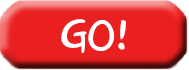
<style>
.page{position:relative;width:189px;height:70px;background:#ea2020}
.page>*{position:absolute;margin:0}
.t1{font:47.5px "DXHgrmB-KSCpc-EUC-H";letter-spacing:-0.025em;color:#ffffff}
</style>
<div class="page">
<p class="t1" style="left:61px;top:19px;width:65px;height:34px">GO!</p>
</div>
